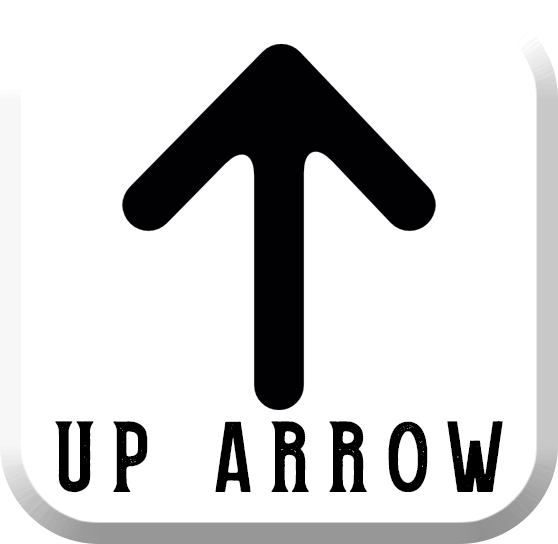
<style>
.page{position:relative;width:558px;height:544px;background:#ffffff}
.page>*{position:absolute;margin:0}
.t1{font:100px "GFBricfield-Demo";letter-spacing:0.16em;color:#000000}
</style>
<div class="page">
<p class="t1" style="left:55px;top:421px;width:448px;height:72px">Up arrow</p>
</div>
